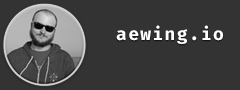
<style>
.page{position:relative;width:240px;height:90px;background:#333333}
.page>*{position:absolute;margin:0}
.t1{font:18px "FiraMonoForPowerline-Bold";letter-spacing:0.075em;color:#ffffff}
</style>
<div class="page">
<p class="t1" style="left:116px;top:25px;width:107px;height:19px">aewing.io</p>
</div>
